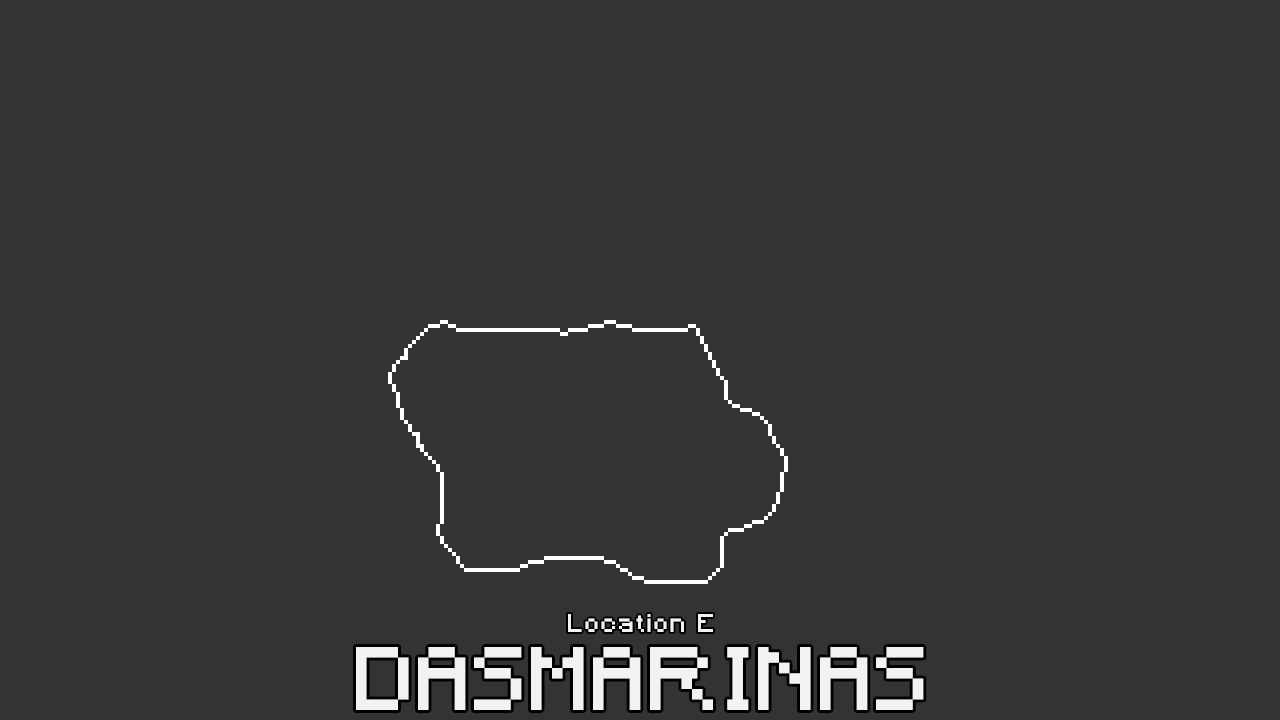
<style>
.page{position:relative;width:1280px;height:720px;background:#333333}
.page>*{position:absolute;margin:0}
.t1{font:24px "Minecraft";letter-spacing:0.1em;color:#f4f1f1}
.t2{font:84px "Minecraft";letter-spacing:0.05em;color:#f4f1f1}
</style>
<div class="page">
<p class="t1" style="left:568px;top:614px;width:145px;height:18px">Location E</p>
<p class="t2" style="left:356px;top:647px;width:568px;height:63px">DASMARINAS</p>
</div>
